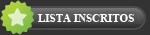
<style>
.page{position:relative;width:150px;height:35px;background:#333333}
.page>*{position:absolute;margin:0}
.t1{font:11px "TimesNewRomanPS-BoldMT";color:#ffffff}
</style>
<div class="page">
<p class="t1" style="left:38px;top:14px;width:96px;height:8px">LISTA INSCRITOS</p>
</div>
